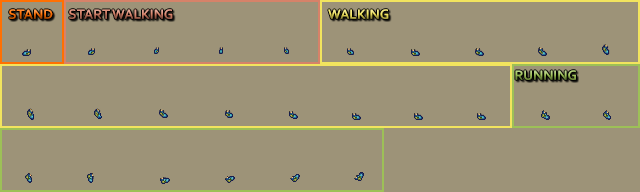
<style>
.page{position:relative;width:640px;height:192px;background:#9d9378}
.page>*{position:absolute;margin:0}
.t1{font:14px "Corbel-Bold"}
</style>
<div class="page">
<p class="t1" style="left:9px;top:9px;width:44px;height:10px">STAND</p>
<p class="t1" style="left:69px;top:9px;width:104px;height:10px">START WALKING</p>
<p class="t1" style="left:328px;top:9px;width:61px;height:10px">WALKING</p>
<p class="t1" style="left:515px;top:70px;width:61px;height:10px">RUNNING</p>
</div>
